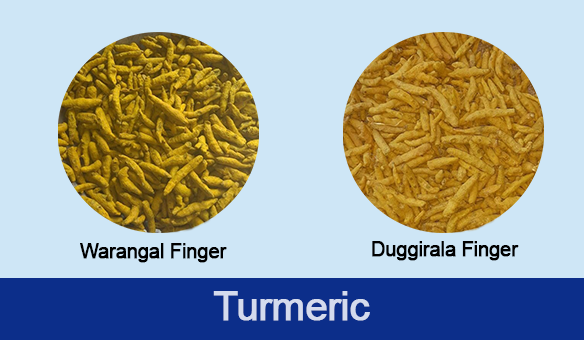
<style>
.page{position:relative;width:584px;height:340px;background:#cee6f6}
.page>*{position:absolute;margin:0}
.t1{font:20px "ArialMT";letter-spacing:-0.03em;color:#000000;font-weight:bold}
.t2{font:40.2px "ArialMT";letter-spacing:-0.03em;color:#d4dbed;font-weight:bold}
</style>
<div class="page">
<p class="t1" style="left:80px;top:243px;width:147px;height:20px">Warangal Finger</p>
<p class="t1" style="left:372px;top:241px;width:147px;height:20px">Duggirala Finger</p>
<p class="t2" style="left:213px;top:291px;width:157px;height:30px">Turmeric</p>
</div>
